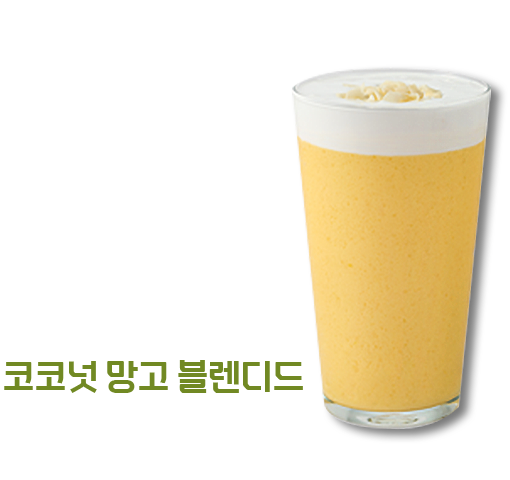
<style>
.page{position:relative;width:510px;height:480px;background:#ffffff}
.page>*{position:absolute;margin:0}
.t1{font:36.9px "EliceDigitalBaeum-Bd";letter-spacing:-0.05em;color:#718923}
</style>
<div class="page">
<p class="t1" style="left:4px;top:360px;width:299px;height:33px">코코넛 망고 블렌디드</p>
</div>
